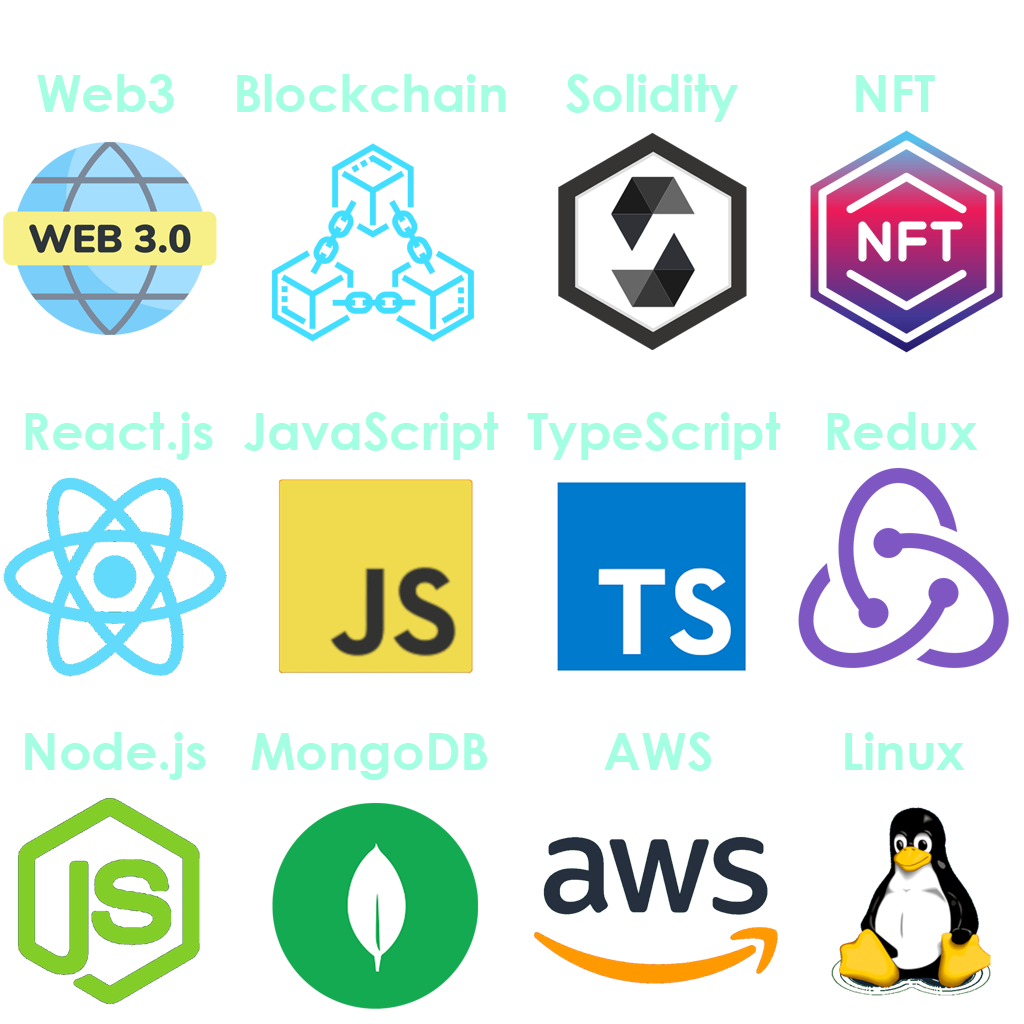
<style>
.page{position:relative;width:1024px;height:1024px;background:#ffffff}
.page>*{position:absolute;margin:0}
.t1{font:50.8px "CenturyGothic-Bold";color:#a4ffe2}
</style>
<div class="page">
<p class="t1" style="left:37px;top:74px;width:898px;height:48px">Web3    Blockchain    Solidity        NFT</p>
<p class="t1" style="left:25px;top:412px;width:953px;height:48px">React.js  JavaScript  TypeScript   Redux</p>
<p class="t1" style="left:25px;top:732px;width:940px;height:48px">Node.js   MongoDB        AWS         Linux</p>
</div>
